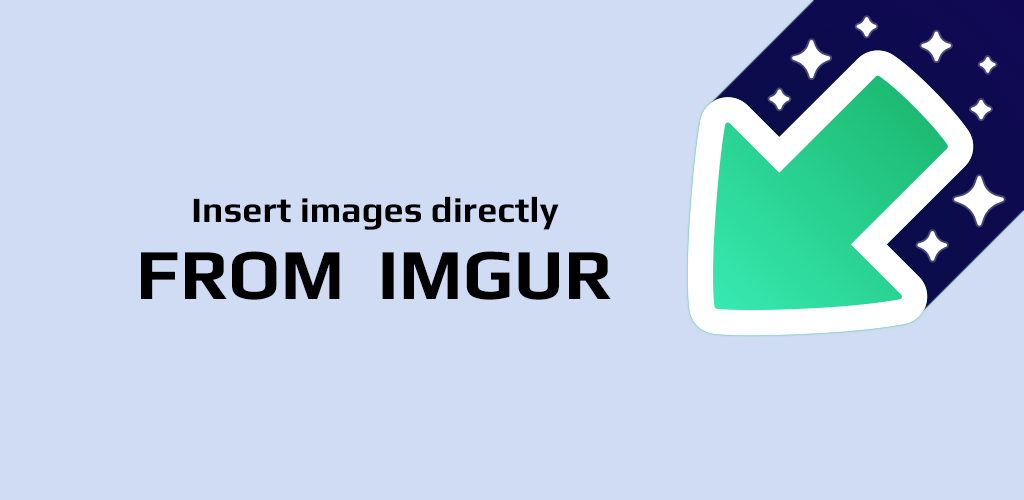
<style>
.page{position:relative;width:1024px;height:500px;background:#cfdcf3}
.page>*{position:absolute;margin:0}
.t1{font:36px "Play-Bold";color:#000000}
.t2{font:72px "Play-Bold";color:#000000}
</style>
<div class="page">
<p class="t1" style="left:193px;top:196px;width:366px;height:34px">Insert images directly</p>
<p class="t2" style="left:141px;top:251px;width:470px;height:49px">FROM  IMGUR</p>
</div>
